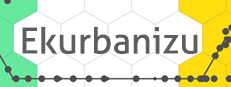
<style>
.page{position:relative;width:231px;height:87px;background:#ffffff}
.page>*{position:absolute;margin:0}
.t1{font:36px "Aller";color:#5e5e5e}
</style>
<div class="page">
<p class="t1" style="left:22px;top:26px;width:176px;height:28px">Ekurbanizu</p>
</div>
